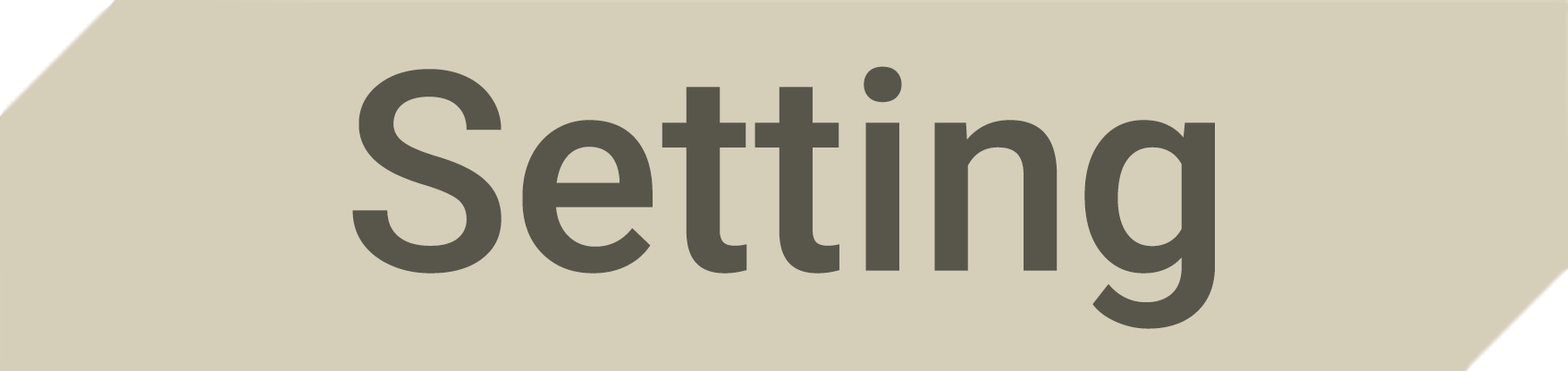
<style>
.page{position:relative;width:1568px;height:371px;background:#d5ceb8}
.page>*{position:absolute;margin:0}
.t1{font:279.4px "Roboto-Medium";color:#58564b}
</style>
<div class="page">
<p class="t1" style="left:352px;top:66px;width:863px;height:263px">Setting</p>
</div>
